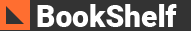
<style>
.page{position:relative;width:191px;height:31px;background:#333333}
.page>*{position:absolute;margin:0}
.t1{font:30px "Roboto-Black";color:#ffffff}
</style>
<div class="page">
<p class="t1" style="left:37px;top:4px;width:140px;height:23px">BookShelf</p>
</div>
